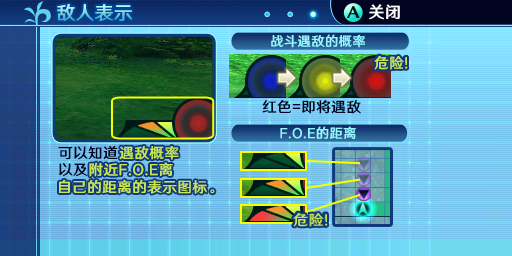
<style>
.page{position:relative;width:512px;height:256px}
.page>*{position:absolute;margin:0}
.t1{font:18.7px "HYWenHei-FEW";letter-spacing:0.025em}
.t2{font:16px "HYWenHei-FEW";letter-spacing:0.025em;color:#fefefe}
.t3{font:13.3px "HYWenHei-FEW";letter-spacing:0.025em;color:#94f7ff}
.t4{font:14.7px "HYWenHei-FEW";letter-spacing:0.025em;color:#c6e752}
.t5{font:14.7px "HYWenHei-FEW";letter-spacing:0.025em;color:#000421}
.t6{font:14.7px/16.7px "HYWenHei-FEW";letter-spacing:0.025em}
.t7{font:14.7px/16.7px "HYWenHei-FEW";letter-spacing:0.025em;color:#c6e752}
.t8{font:14.7px/17.3px "HYWenHei-FEW";letter-spacing:0.025em;color:#c6e752}
</style>
<div class="page">
<p class="t1" style="left:57px;top:4px;width:75px;height:18px">敌人表示</p>
<p class="t2" style="left:369px;top:4px;width:31px;height:16px">关闭</p>
<p class="t3" style="left:271px;top:34px;width:94px;height:14px">战斗遇敌的概率</p>
<p class="t4" style="left:374px;top:55px;width:34px;height:15px">危险!</p>
<p class="t5" style="left:262px;top:99px;width:99px;height:15px">红色=即将遇敌</p>
<p class="t3" style="left:280px;top:126px;width:76px;height:13px">F.O.E的距离</p>
<p class="t6" style="left:58px;top:145px;width:158px;height:48px">可以知道遇敌概率<br>以及附近F.O.E离<br>自己的距离的表示图标。</p>
<p class="t7" style="left:59px;top:146px;width:156px;height:48px">遇敌概率<br><span class="t8">      附近F.O.E离<br></span>自己的距离的表示图标。</p>
</div>
